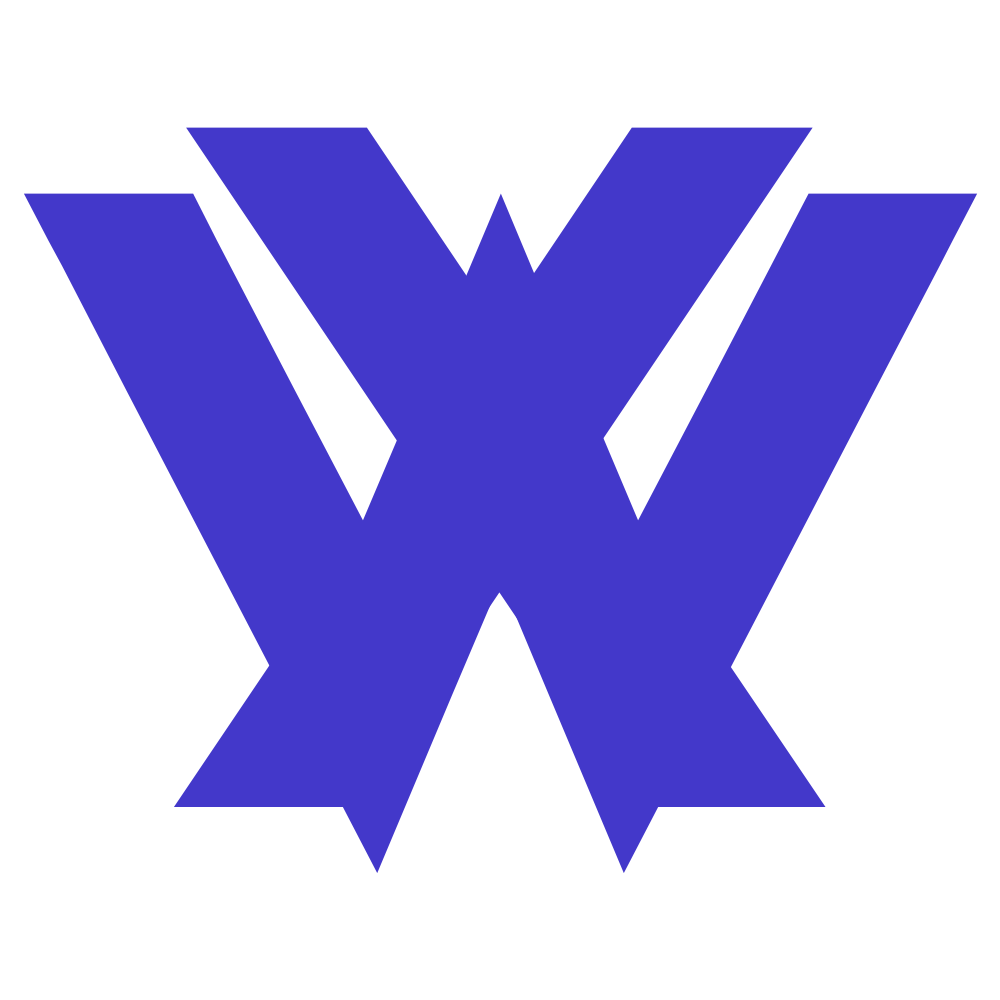
<style>
.page{position:relative;width:1000px;height:1000px;background:#ffffff}
.page>*{position:absolute;margin:0}
.t1{font:1018.7px "AvalorsPersonalUseOnly-Reg";letter-spacing:0.08em;color:#4338ca}
</style>
<div class="page">
<p class="t1" style="left:173px;top:127px;width:653px;height:680px">X</p>
<p class="t1" style="left:23px;top:193px;width:955px;height:680px">W</p>
</div>
